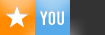
<style>
.page{position:relative;width:105px;height:35px;background:#333333}
.page>*{position:absolute;margin:0}
.t1{font:16px "Bebas";color:#ffffff}
</style>
<div class="page">
<p class="t1" style="left:39px;top:10px;width:25px;height:15px">YOU</p>
</div>
